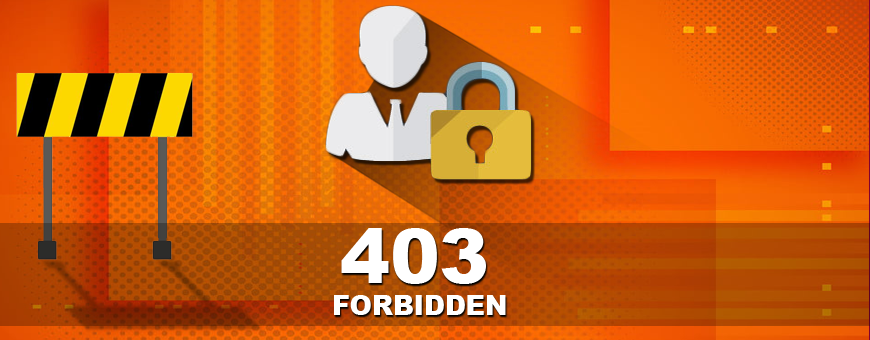
<style>
.page{position:relative;width:870px;height:340px}
.page>*{position:absolute;margin:0}
.t1{font:74.6px "Arial-Black";color:#ffffff}
.t2{font:26.8px "Arial-Black";color:#ffffff}
.t3{font:60px "Arial-Black";color:#ffffff}
</style>
<div class="page">
<p class="t1" style="left:341px;top:228px;width:145px;height:56px">403</p>
<p class="t2" style="left:334px;top:295px;width:172px;height:20px"><span class="t3"> </span>FORBIDDEN</p>
</div>
